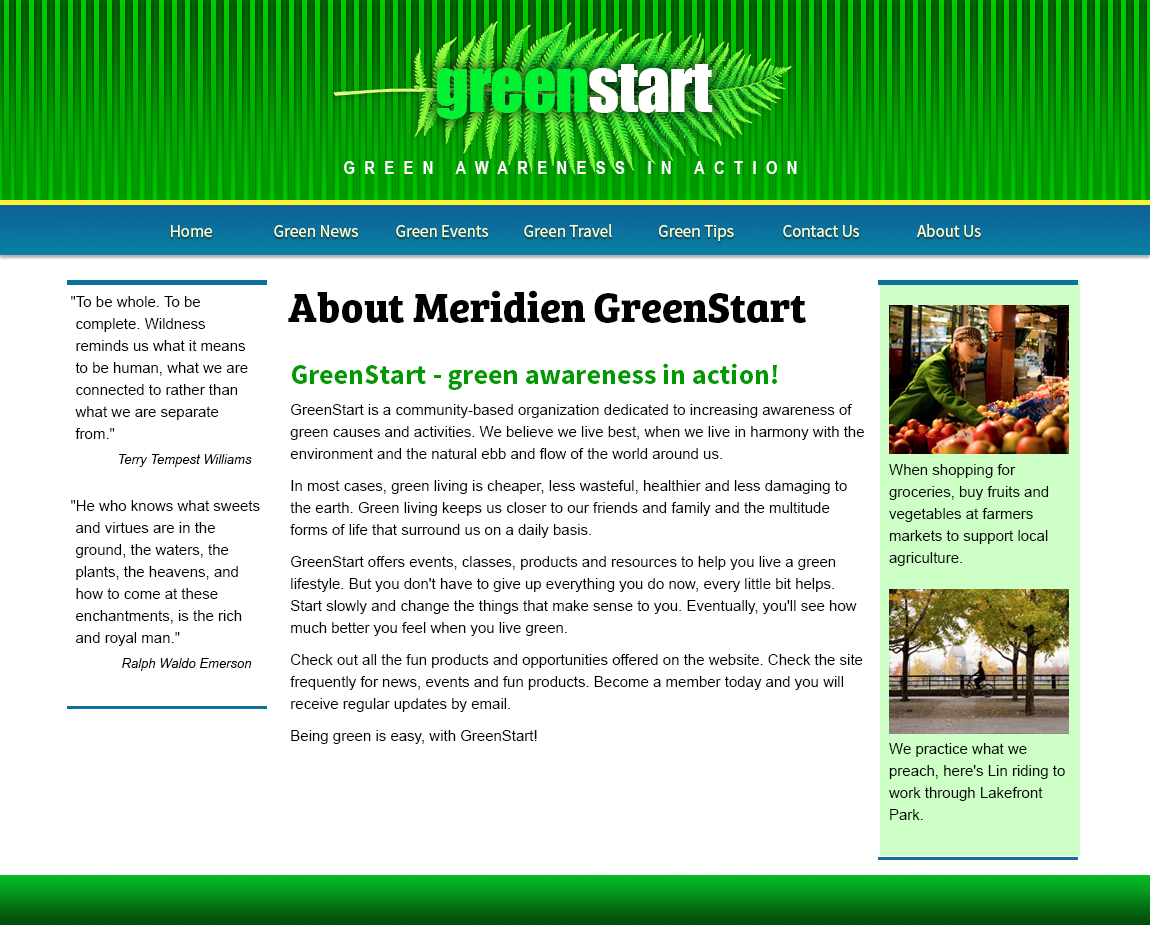
<style>
.page{position:relative;width:1150px;height:925px;background:#ffffff}
.page>*{position:absolute;margin:0}
.t1{font:66px "Impact";letter-spacing:-0.02em;color:#03f233}
.t2{font:66px "Impact";letter-spacing:-0.02em;color:#ffffff}
.t3{font:18px "ArialNarrow-Bold";letter-spacing:0.52em;color:#ffffff}
.t4{font:12px "MyriadPro-Regular";color:#ffffcc}
.t5{font:42px "BreeSerif-Bold";color:#000000}
.t6{font:12px "MyriadPro-Regular";color:#000000}
.t7{font:13px "MyriadPro-Regular";color:#000000}
.t8{font:28px "SourceSansPro-Bold";color:#009900}
.t9{font:15px/22px "ArialMT";color:#000000}
</style>
<div class="page">
<p class="t1" style="left:436px;top:64px;width:277px;height:55px">green<span class="t2">start</span></p>
<p class="t3" style="left:344px;top:161px;width:453px;height:13px">GREEN AWARENESS IN ACTION</p>
<p class="t4" style="left:171px;top:225px;width:41px;height:12px">Home</p>
<p class="t4" style="left:274px;top:225px;width:84px;height:12px">Green News</p>
<p class="t4" style="left:396px;top:225px;width:92px;height:12px">Green Events</p>
<p class="t4" style="left:524px;top:224px;width:88px;height:13px">Green Travel</p>
<p class="t4" style="left:659px;top:225px;width:75px;height:16px">Green Tips</p>
<p class="t4" style="left:783px;top:225px;width:76px;height:12px">Contact Us</p>
<p class="t4" style="left:917px;top:224px;width:64px;height:13px">About Us</p>
<p class="t5" style="left:288px;top:290px;width:518px;height:33px">About Meridien GreenStart</p>
<p class="t6" style="left:71px;top:296px;width:189px;height:375px">"To be whole. To be complete. Wildness reminds us what it means to be human, what we are connected to rather than what we are separate from."<br>Terry Tempest Williams<br>"He who knows what sweets and virtues are in the ground, the waters, the plants, the heavens, and how to come at these enchantments, is the rich and royal man."<br><span class="t7">Ralph Waldo Emerson</span></p>
<p class="t8" style="left:292px;top:363px;width:485px;height:27px">GreenStart - green awareness in action!</p>
<p class="t9" style="left:290px;top:404px;width:574px;height:340px">GreenStart is a community-based organization dedicated to increasing awareness of green causes and activities. We believe we live best, when we live in harmony with the environment and the natural ebb and flow of the world around us.<br>In most cases, green living is cheaper, less wasteful, healthier and less damaging to the earth. Green living keeps us closer to our friends and family and the multitude forms of life that surround us on a daily basis.<br>GreenStart offers events, classes, products and resources to help you live a green lifestyle. But you don't have to give up everything you do now, every little bit helps. Start slowly and change the things that make sense to you. Eventually, you'll see how much better you feel when you live green.<br>Check out all the fun products and opportunities offered on the website. Check the site frequently for news, events and fun products. Become a member today and you will receive regular updates by email.<br>Being green is easy, with GreenStart!</p>
<p class="t6" style="left:889px;top:464px;width:160px;height:102px">When shopping for groceries, buy fruits and vegetables at farmers markets to support local agriculture.</p>
<p class="t6" style="left:889px;top:743px;width:176px;height:77px">We practice what we preach, here's Lin riding to work through Lakefront Park.</p>
</div>
